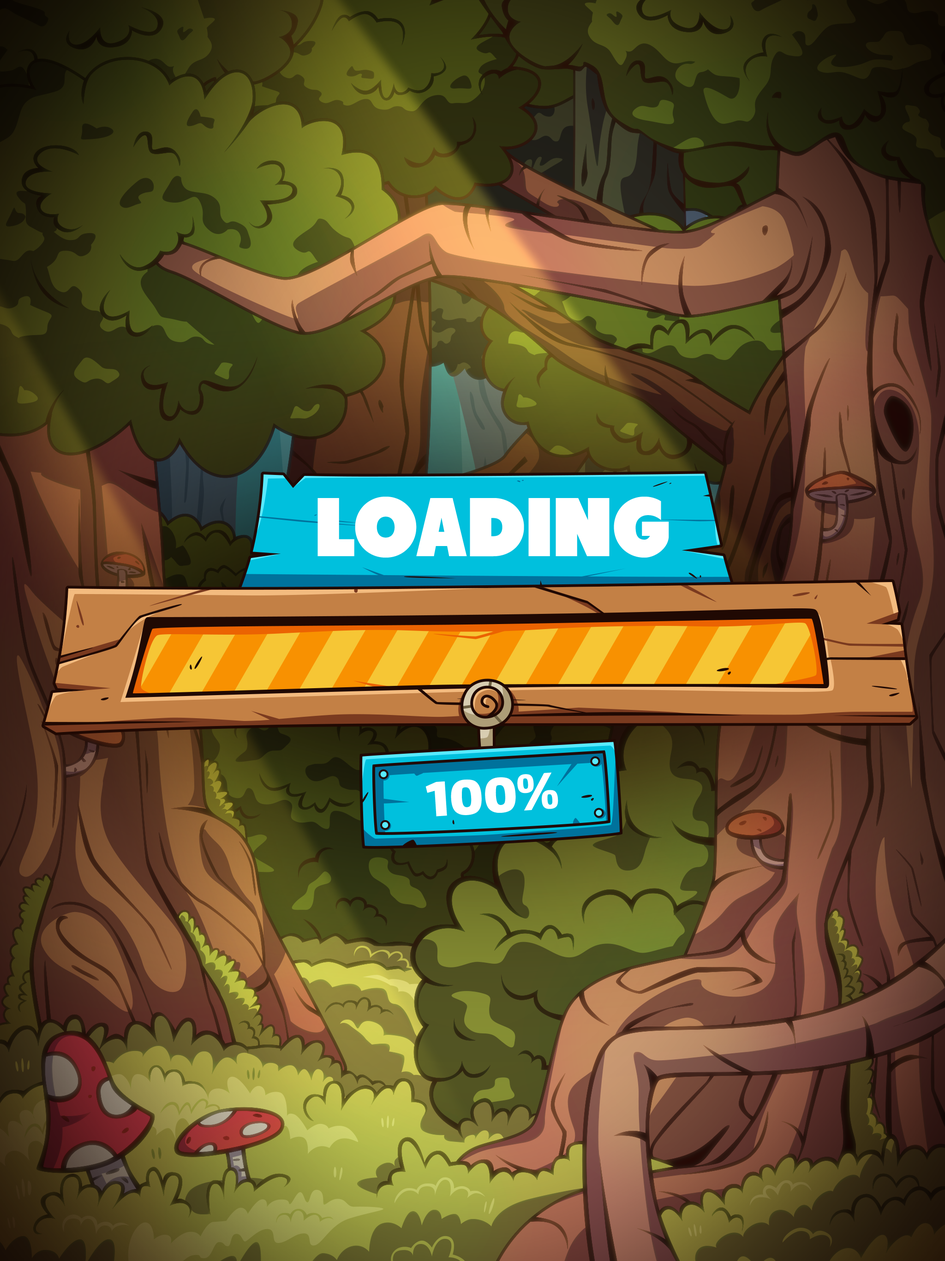
<style>
.page{position:relative;width:945px;height:1261px}
.page>*{position:absolute;margin:0}
.t1{font:83.1px "Tondu-Beta";color:#ffffff;text-transform:uppercase}
.t2{font:60px "Lalezar-Regular";color:#ffffff}
</style>
<div class="page">
<p class="t1" style="left:318px;top:497px;width:351px;height:61px">loading</p>
<p class="t2" style="left:426px;top:772px;width:133px;height:45px;rotate:-4deg">100%</p>
</div>
